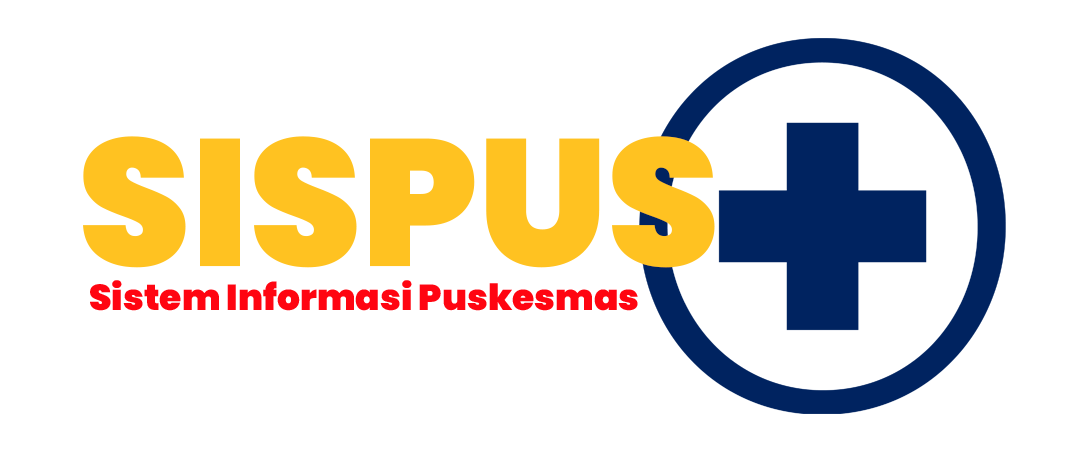
<style>
.page{position:relative;width:1080px;height:460px;background:#ffffff}
.page>*{position:absolute;margin:0}
.t1{font:180px "Poppins-Black";color:#ffc221}
.t2{font:36px "Poppins-Black";color:#ff0511}
</style>
<div class="page">
<p class="t1" style="left:83px;top:136px;width:632px;height:132px">SISPUS</p>
<p class="t2" style="left:90px;top:280px;width:548px;height:31px">Sistem Informasi Puskesmas</p>
</div>
